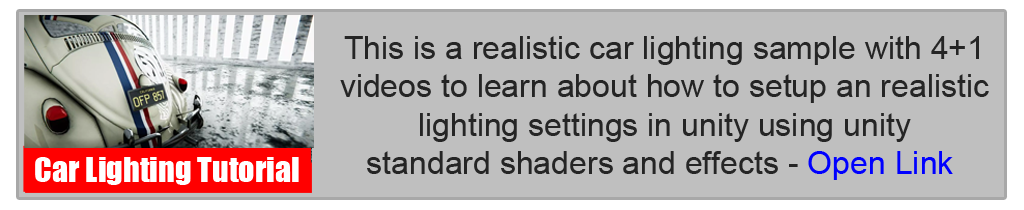
<style>
.page{position:relative;width:1024px;height:210px;background:#bfbfbf}
.page>*{position:absolute;margin:0}
.t1{font:32px "ArialMT";color:#252525}
.t2{font:32px "ArialMT";color:#0000ff}
.t3{font:32px "Impact";color:#ffffff}
</style>
<div class="page">
<p class="t1" style="left:340px;top:36px;width:649px;height:144px;text-align:center">This is a realistic car lighting sample with 4+1 <br>videos to learn about how to setup an realistic <br>lighting settings in unity using unity <br>standard shaders and effects - <span class="t2">Open Link</span></p>
<p class="t3" style="left:35px;top:157px;width:264px;height:28px">Car Lighting Tutorial</p>
</div>
